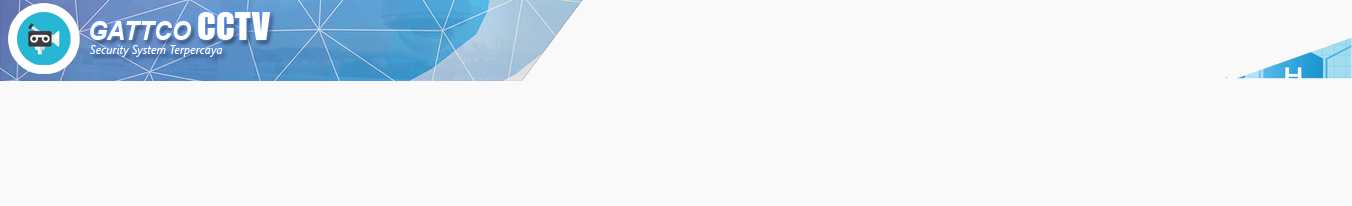
<style>
.page{position:relative;width:1352px;height:206px;background:#f9f9f9}
.page>*{position:absolute;margin:0}
.t1{font:26px "Arial-BoldItalicMT";color:#ffffff;scale:0.95 1}
.t2{font:36px "Impact";color:#ffffff;scale:0.95 1}
.t3{font:12px "SegoeUI-Italic";color:#ffffff;scale:0.95 1}
</style>
<div class="page">
<p class="t1" style="left:90px;top:12px;width:180px;height:28px">GATTCO <span class="t2">CCTV</span></p>
<p class="t3" style="left:90px;top:45px;width:133px;height:12px">Security System Terpercaya</p>
</div>
